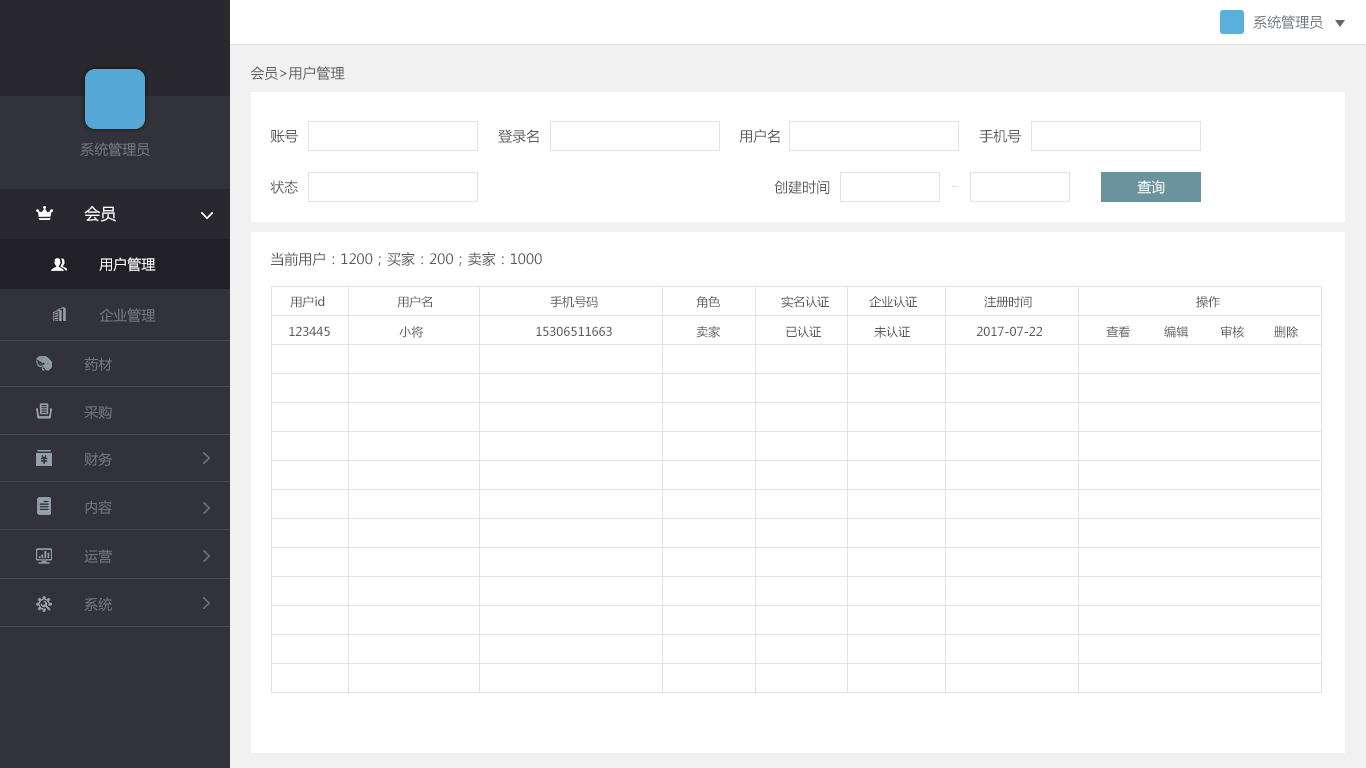
<style>
.page{position:relative;width:1366px;height:768px;background:#ffffff}
.page>*{position:absolute;margin:0}
.t1{font:14px "MicrosoftYaHei";color:#6f767e}
.t2{font:14px "MicrosoftYaHei";color:#5a5a5a}
.t3{font:14px "MicrosoftYaHei";color:#ffffff}
.t4{font:16px "MicrosoftYaHei";color:#ffffff}
.t5{font:12px "MicrosoftYaHei";color:#5a5a5a}
.t6{font:12px "MicrosoftYaHei"}
</style>
<div class="page">
<p class="t1" style="left:1253px;top:15px;width:70px;height:14px">系统管理员</p>
<p class="t2" style="left:250px;top:66px;width:95px;height:14px">会员&gt;用户管理</p>
<p class="t2" style="left:270px;top:129px;width:29px;height:14px">账号</p>
<p class="t2" style="left:498px;top:129px;width:41px;height:14px">登录名</p>
<p class="t2" style="left:739px;top:129px;width:41px;height:14px">用户名</p>
<p class="t2" style="left:979px;top:129px;width:43px;height:14px">手机号</p>
<p class="t1" style="left:80px;top:142px;width:70px;height:15px">系统管理员</p>
<p class="t2" style="left:270px;top:180px;width:28px;height:14px">状态</p>
<p class="t2" style="left:774px;top:180px;width:56px;height:14px">创建时间</p>
<p class="t3" style="left:1137px;top:180px;width:28px;height:14px">查询</p>
<p class="t4" style="left:84px;top:206px;width:32px;height:16px">会员</p>
<p class="t3" style="left:99px;top:257px;width:57px;height:15px">用户管理</p>
<p class="t2" style="left:271px;top:252px;width:271px;height:14px">当前用户：1200；买家：200；卖家：1000</p>
<p class="t5" style="left:290px;top:296px;width:35px;height:12px">用户id</p>
<p class="t5" style="left:397px;top:296px;width:35px;height:12px">用户名</p>
<p class="t5" style="left:550px;top:296px;width:48px;height:12px">手机号码</p>
<p class="t5" style="left:696px;top:296px;width:24px;height:12px">角色</p>
<p class="t5" style="left:781px;top:296px;width:48px;height:12px">实名认证</p>
<p class="t5" style="left:869px;top:296px;width:48px;height:12px">企业认证</p>
<p class="t5" style="left:984px;top:296px;width:48px;height:12px">注册时间</p>
<p class="t5" style="left:1196px;top:296px;width:24px;height:12px">操作</p>
<p class="t1" style="left:99px;top:308px;width:57px;height:15px">企业管理</p>
<p class="t5" style="left:289px;top:326px;width:41px;height:10px">123445</p>
<p class="t5" style="left:399px;top:326px;width:24px;height:12px">小将</p>
<p class="t5" style="left:536px;top:326px;width:76px;height:10px">15306511663</p>
<p class="t5" style="left:696px;top:325px;width:25px;height:13px">卖家</p>
<p class="t5" style="left:786px;top:326px;width:35px;height:12px">已认证</p>
<p class="t5" style="left:874px;top:326px;width:36px;height:12px">未认证</p>
<p class="t5" style="left:976px;top:326px;width:66px;height:10px">2017-07-22</p>
<p class="t5" style="left:1106px;top:326px;width:24px;height:12px">查看</p>
<p class="t6" style="left:1164px;top:326px;width:24px;height:12px">编辑</p>
<p class="t5" style="left:1221px;top:325px;width:23px;height:13px">审核</p>
<p class="t5" style="left:1274px;top:326px;width:25px;height:12px">删除</p>
<p class="t1" style="left:84px;top:357px;width:28px;height:14px">药材</p>
<p class="t1" style="left:84px;top:405px;width:28px;height:14px">采购</p>
<p class="t1" style="left:84px;top:452px;width:29px;height:14px">财务</p>
<p class="t1" style="left:85px;top:500px;width:27px;height:14px">内容</p>
<p class="t1" style="left:84px;top:549px;width:28px;height:15px">运营</p>
<p class="t1" style="left:84px;top:597px;width:28px;height:14px">系统</p>
</div>
